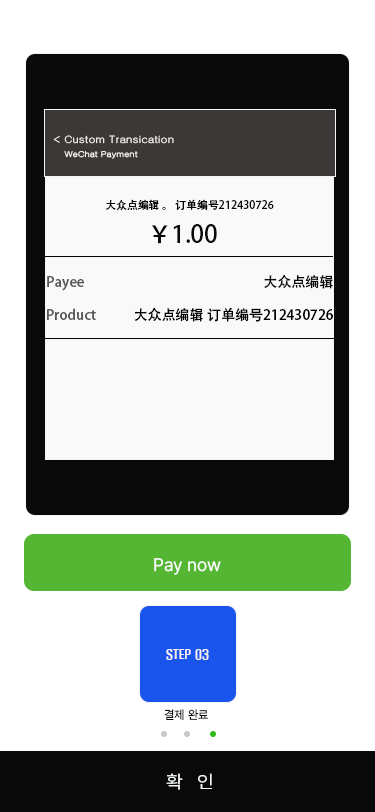
<style>
.page{position:relative;width:375px;height:812px;background:#ffffff}
.page>*{position:absolute;margin:0}
.t1{font:10px/14.2px "Gulim";color:#faf5f5;scale:1.14 1}
.t2{font:8px/14.2px "Gulim";color:#faf5f5;scale:1.14 1}
.t3{font:10.9px "AdobeHeitiStd-Regular";color:#090909}
.t4{font:24px "AdobeHeitiStd-Regular";color:#090909}
.t5{font:14px "AdobeHeitiStd-Regular";color:#555759}
.t6{font:14px "AdobeHeitiStd-Regular";color:#090909}
.t7{font:14px "AdobeHeitiStd-Regular";color:#000000}
.t8{font:18px "Pretendard-Regular";color:#f8fbf7}
.t9{font:12px "H2hdrM";color:#f6f0f0}
.t10{font:12px "Pretendard-Regular";color:#0b0a0a}
.t11{font:11px "H2hdrM";color:#0b0a0a}
.t12{font:18px "Pretendard-Regular";color:#f2f6f2;scale:1.07 1}
</style>
<div class="page">
<p class="t1" style="left:53px;top:135px;width:121px;height:24px">&lt; Custom Transication<br>   <span class="t2">WeChat Payment</span></p>
<p class="t3" style="left:105px;top:199px;width:169px;height:12px">大众点编辑 。 订单编号212430726</p>
<p class="t4" style="left:152px;top:224px;width:65px;height:20px">￥1.00</p>
<p class="t5" style="left:47px;top:275px;width:286px;height:16px">Payee      <span class="t6">                                                   大众点编辑</span></p>
<p class="t7" style="left:47px;top:307px;width:286px;height:15px"><span class="t5">Product </span>           大众点编辑 订单编号212430726</p>
<p class="t8" style="left:154px;top:558px;width:67px;height:17px">Pay now</p>
<p class="t9" style="left:166px;top:649px;width:43px;height:11px">STEP 03</p>
<p class="t10" style="left:164px;top:709px;width:45px;height:12px"><span class="t11">    </span>결제 완료</p>
<p class="t12" style="left:166px;top:773px;width:46px;height:17px">확   인</p>
</div>
